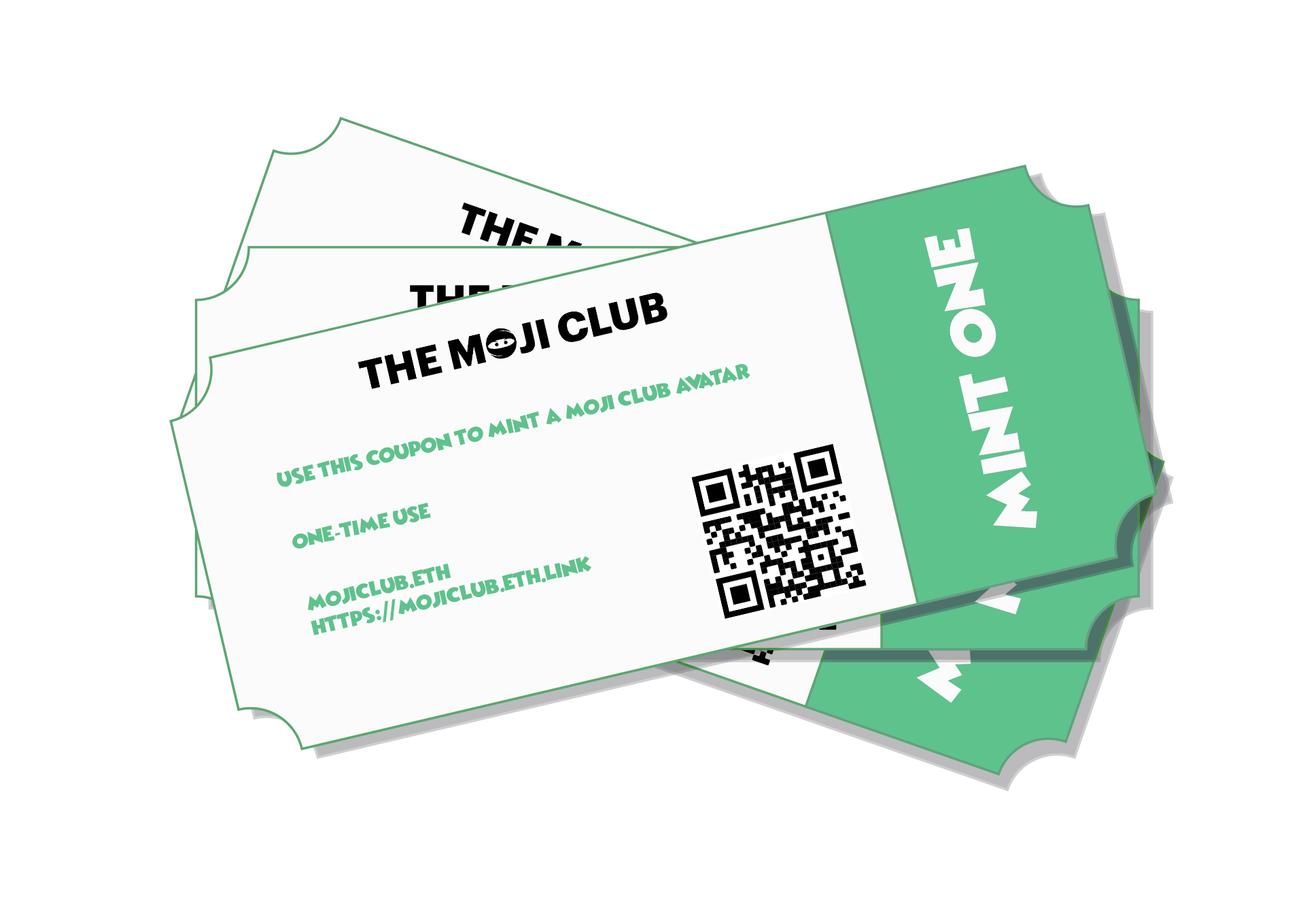
<style>
.page{position:relative;width:1305px;height:914px;background:#ffffff}
.page>*{position:absolute;margin:0}
.t1{font:17.7px "WickedMouse";color:#5ec28c}
.t2{font:17.7px "Graphik-Bold";color:#5ec28c}
.t3{font:21.8px/24.5px "Graphik-Bold";color:#5ec28c}
</style>
<div class="page">
<p class="t1" style="left:277px;top:364px;width:473px;height:271px;rotate:-13deg">use this coupon to mint a Moji Club avatar<br><br><br>ONE<span class="t2">-</span>TIME USE<br><br><br>mojiclub.eth<br>https<span class="t3">://</span>mojiclub.eth.link</p>
</div>
